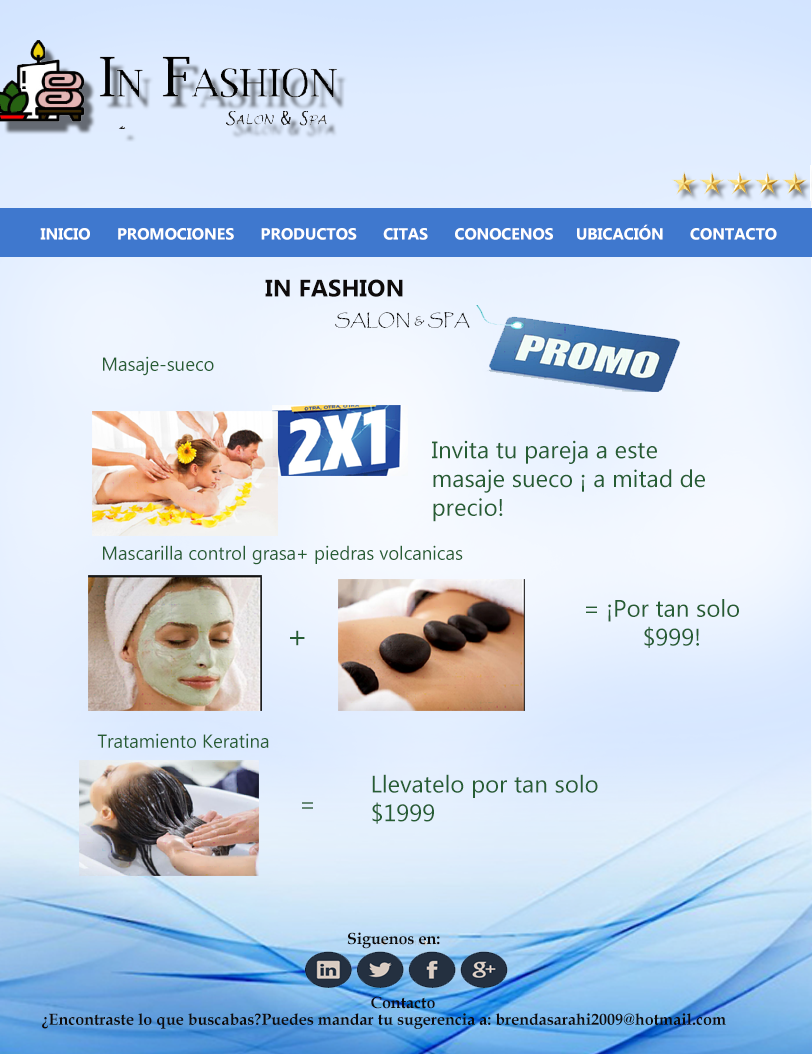
<style>
.page{position:relative;width:812px;height:1054px}
.page>*{position:absolute;margin:0}
.t1{font:16px "MicrosoftTaiLe-Bold";color:#ffffff}
.t2{font:12px "MicrosoftTaiLe-Bold";color:#ffffff}
.t3{font:16px "Papyrus-Regular";color:#0e0b0b}
.t4{font:24px "MicrosoftTaiLe-Bold";color:#0e0b0b}
.t5{font:18.7px "MicrosoftTaiLe";color:#265d34}
.t6{font:24px "MicrosoftTaiLe";color:#265d34}
.t7{font:32px "MicrosoftTaiLe";color:#265d34}
.t8{font:24px "MicrosoftTaiLe"}
.t9{font:12px "BookAntiqua-Bold";color:#0e0b0b}
</style>
<div class="page">
<p class="t1" style="left:40px;top:224px;width:737px;height:16px"><span class="t2">    I</span>NICIO      PROMOCIONES      PRODUCTOS      CITAS      CONOCENOS     UBICACIÓN      CONTACTO</p>
<p class="t3" style="left:265px;top:279px;width:205px;height:49px"><span class="t4">IN FASHION<br>          </span> SALON &amp; SPA</p>
<p class="t5" style="left:103px;top:356px;width:111px;height:20px">Masaje-sueco</p>
<p class="t6" style="left:432px;top:440px;width:273px;height:82px">Invita tu pareja a este masaje sueco ¡ a mitad de precio!</p>
<p class="t5" style="left:103px;top:545px;width:360px;height:20px">Mascarilla control grasa+ piedras volcanicas</p>
<p class="t6" style="left:586px;top:599px;width:153px;height:49px">= ¡Por tan solo <br>         $999!</p>
<p class="t7" style="left:290px;top:630px;width:15px;height:16px">+</p>
<p class="t5" style="left:97px;top:733px;width:172px;height:15px">Tratamiento Keratina</p>
<p class="t6" style="left:372px;top:774px;width:226px;height:50px">Llevatelo por tan solo $1999</p>
<p class="t8" style="left:302px;top:802px;width:11px;height:7px">=</p>
<p class="t9" style="left:347px;top:932px;width:93px;height:17px">Siguenos en:</p>
<p class="t9" style="left:371px;top:996px;width:64px;height:13px">Contacto</p>
<p class="t9" style="left:42px;top:1013px;width:684px;height:16px">¿Encontraste lo que buscabas?Puedes mandar tu sugerencia a: brendasarahi2009@hotmail.com</p>
</div>
